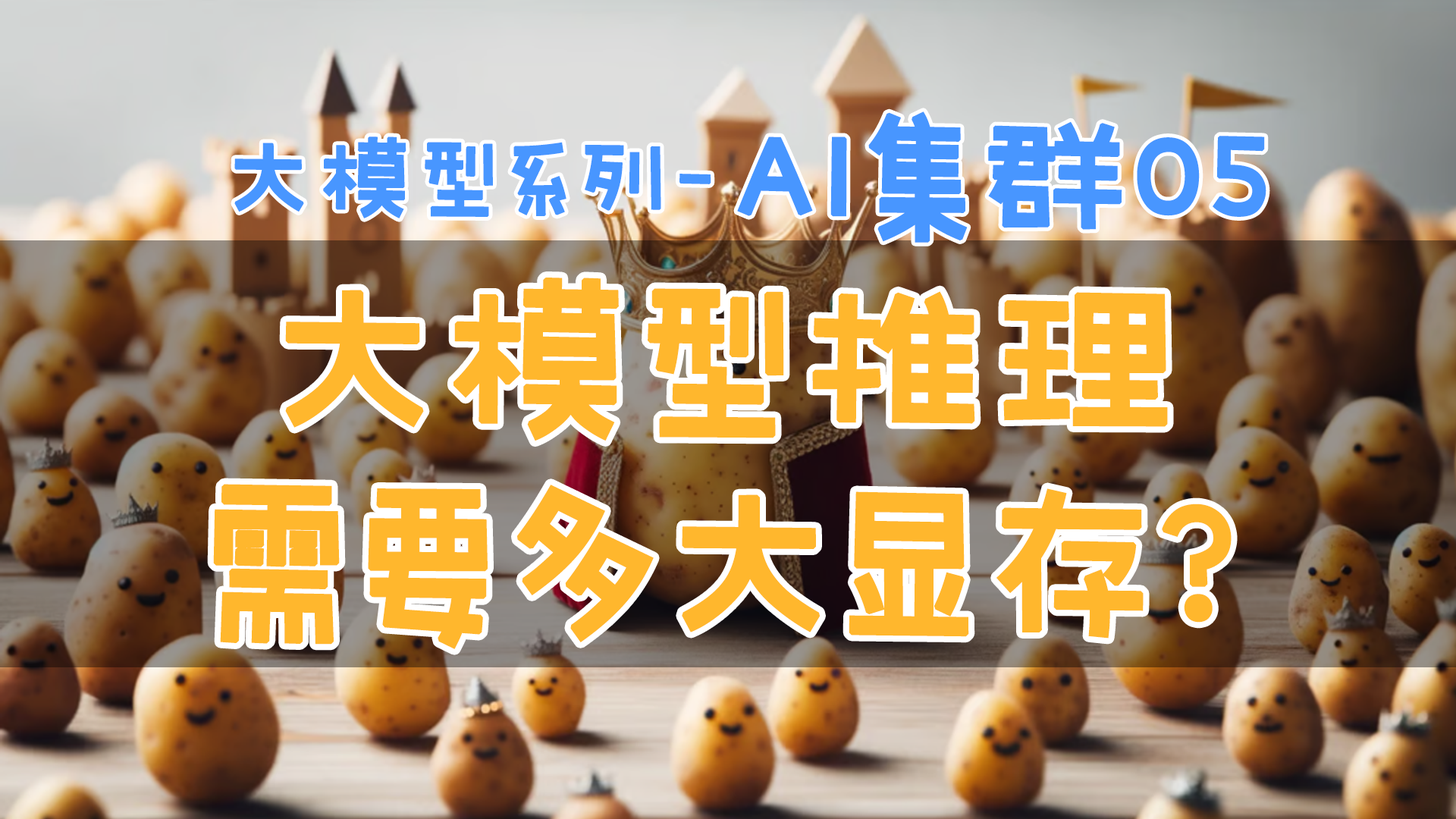
<style>
.page{position:relative;width:1456px;height:819px}
.page>*{position:absolute;margin:0}
.t1{font:136.5px "GEETYPE-SkyGB-Flash-Medium";color:#4896ff;font-weight:bold}
.t2{font:91px "GEETYPE-SkyGB-Flash-Medium";letter-spacing:0.05em;color:#4896ff;font-weight:bold}
.t3{font:182px/204.7px "GEETYPE-SkyGB-Flash-Medium";color:#ffb72d;font-weight:bold}
</style>
<div class="page">
<p class="t1" style="left:737px;top:111px;width:529px;height:132px">AI集群05</p>
<p class="t2" style="left:234px;top:136px;width:477px;height:82px">大模型系列-</p>
<p class="t3" style="left:213px;top:278px;width:1019px;height:371px;text-align:center">大模型推理<br>需要多大显存？</p>
</div>
